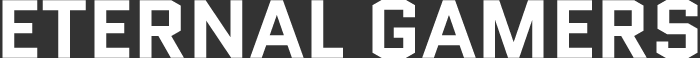
<style>
.page{position:relative;width:700px;height:58px;background:#333333}
.page>*{position:absolute;margin:0}
.t1{font:81.9px "Quantico-Bold";color:#ffffff}
</style>
<div class="page">
<p class="t1" style="left:2px;top:0px;width:696px;height:58px">ETERNAL GAMERS</p>
</div>
